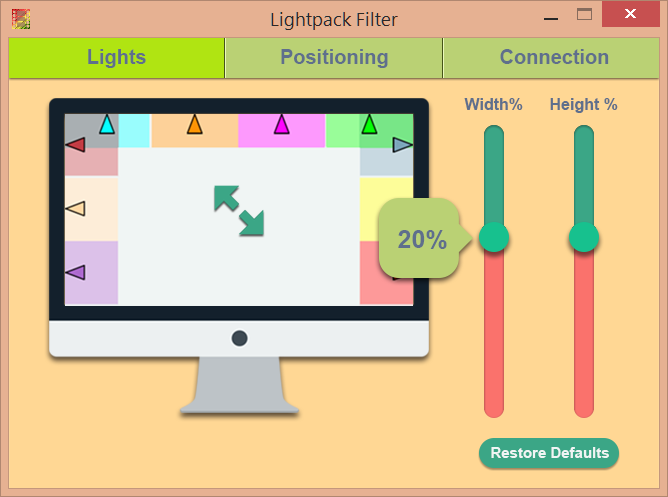
<style>
.page{position:relative;width:668px;height:497px;background:#ffd794}
.page>*{position:absolute;margin:0}
.t1{font:20px "Arial-BoldMT";color:#5f6f8c}
.t2{font:16px "Arial-BoldMT";color:#5f6f8c}
.t3{font:25px "Arial-BoldMT";color:#5f6f8c}
.t4{font:15px "Arial-BoldMT";color:#f0f5f4}
</style>
<div class="page">
<p class="t1" style="left:88px;top:49px;width:58px;height:19px">Lights</p>
<p class="t1" style="left:281px;top:49px;width:107px;height:19px">Positioning</p>
<p class="t1" style="left:500px;top:49px;width:109px;height:15px">Connection</p>
<p class="t2" style="left:464px;top:98px;width:59px;height:12px">Width%</p>
<p class="t2" style="left:550px;top:98px;width:68px;height:15px">Height %</p>
<p class="t3" style="left:398px;top:230px;width:49px;height:19px">20%</p>
<p class="t4" style="left:491px;top:447px;width:118px;height:11px">Restore Defaults</p>
</div>
